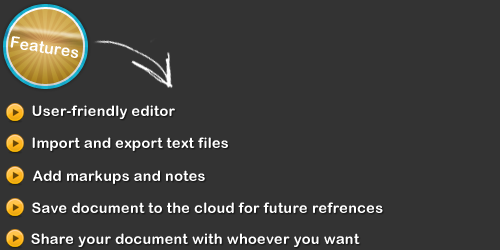
<style>
.page{position:relative;width:500px;height:250px;background:#333333}
.page>*{position:absolute;margin:0}
.t1{font:16px "ArialRoundedMTBold";letter-spacing:0.005em;color:#ffffff}
.t2{font:14.4px "ArialRoundedMTBold";letter-spacing:0.025em;color:#ffffff}
</style>
<div class="page">
<p class="t1" style="left:10px;top:36px;width:68px;height:22px;rotate:9deg">Features</p>
<p class="t2" style="left:32px;top:105px;width:143px;height:14px">User-friendly editor</p>
<p class="t2" style="left:32px;top:137px;width:196px;height:14px">Import and export text files</p>
<p class="t2" style="left:33px;top:170px;width:172px;height:14px">Add markups and notes</p>
<p class="t2" style="left:32px;top:202px;width:351px;height:11px">Save document to the cloud for future refrences</p>
<p class="t2" style="left:31px;top:233px;width:329px;height:14px">Share your document with whoever you want</p>
</div>
